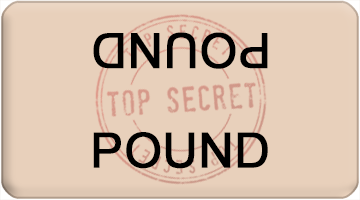
<style>
.page{position:relative;width:360px;height:200px;background:#e8d0bb}
.page>*{position:absolute;margin:0}
.t1{font:48px "ArialMT";color:#000000;font-weight:bold}
</style>
<div class="page">
<p class="t1" style="left:93px;top:32px;width:175px;height:37px;rotate:180deg">POUND</p>
<p class="t1" style="left:93px;top:132px;width:175px;height:37px">POUND</p>
</div>
